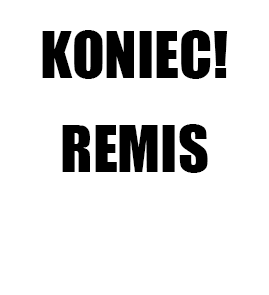
<style>
.page{position:relative;width:269px;height:295px;background:#ffffff}
.page>*{position:absolute;margin:0}
.t1{font:60px "Impact";color:#000000}
</style>
<div class="page">
<p class="t1" style="left:42px;top:30px;width:186px;height:143px;text-align:center">KONIEC!<br><br>REMIS</p>
</div>
